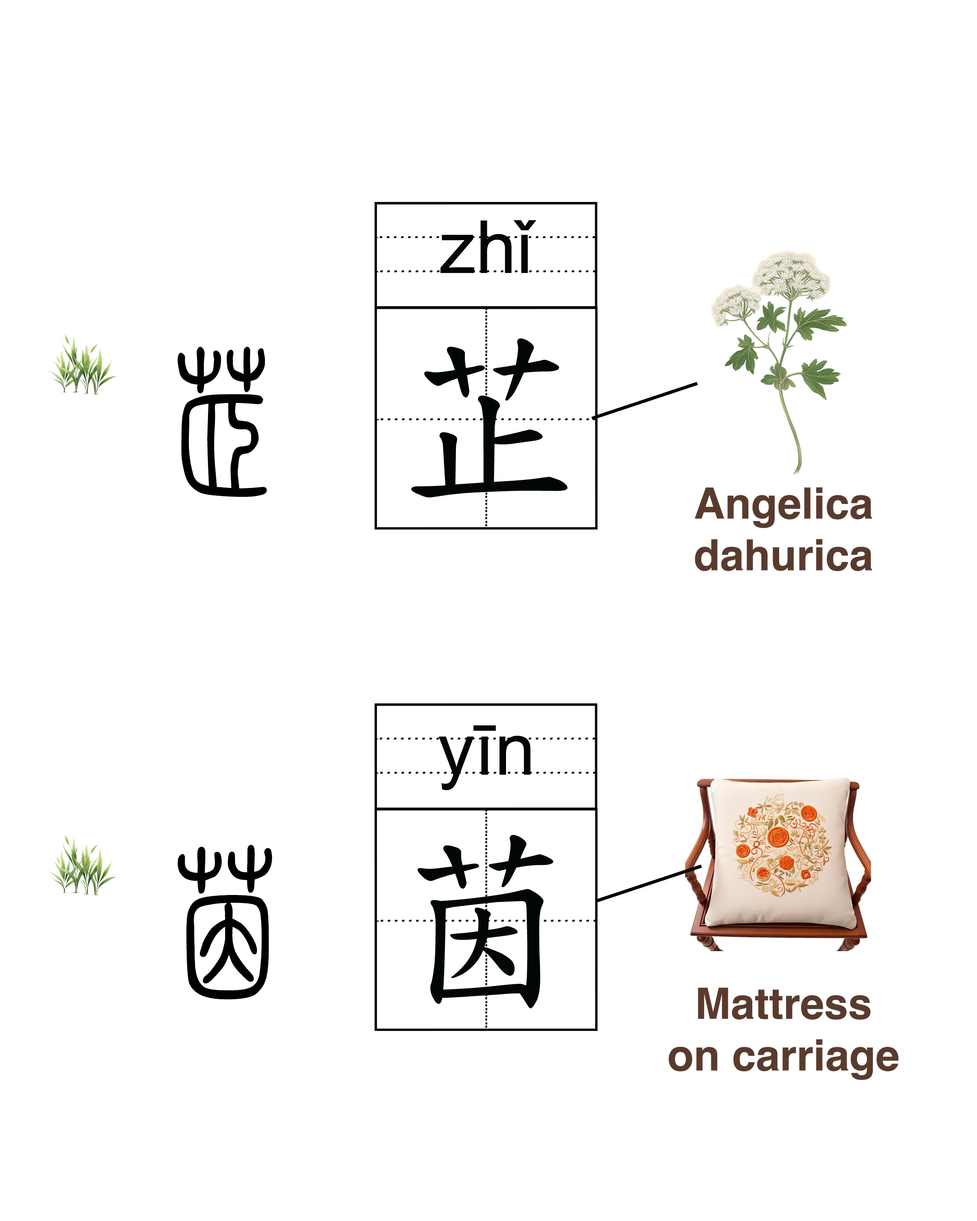
<style>
.page{position:relative;width:977px;height:1221px;background:#ffffff}
.page>*{position:absolute;margin:0}
.t1{font:73.2px "ArialMT";color:#030606}
.t2{font:193.8px "BiauKaiHK-Regular";color:#030606}
.t3{font:43.1px/51.7px "Helvetica-Bold";color:#593b2e}
</style>
<div class="page">
<p class="t1" style="left:440px;top:220px;width:96px;height:53px">zhǐ</p>
<p class="t2" style="left:411px;top:338px;width:156px;height:160px">芷</p>
<p class="t3" style="left:694px;top:487px;width:178px;height:84px;text-align:center">Angelica<br>dahurica</p>
<p class="t1" style="left:439px;top:725px;width:91px;height:65px">yīn</p>
<p class="t2" style="left:417px;top:835px;width:136px;height:173px">茵</p>
<p class="t3" style="left:668px;top:987px;width:230px;height:93px;text-align:center">Mattress<br>on carriage</p>
</div>
